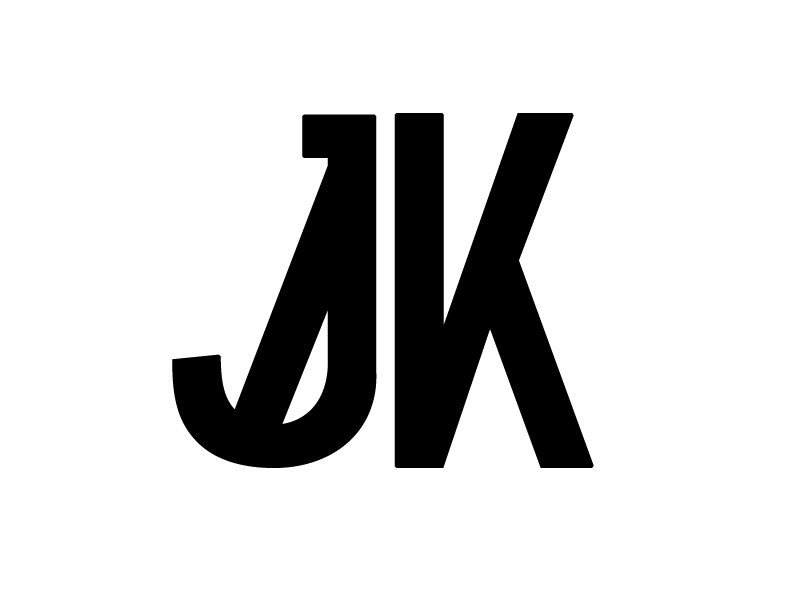
<style>
.page{position:relative;width:800px;height:600px;background:#ffffff}
.page>*{position:absolute;margin:0}
.t1{font:500px "HighTide";letter-spacing:0.02em;color:#000000;font-weight:bold}
</style>
<div class="page">
<p class="t1" style="left:172px;top:113px;width:422px;height:355px">JK</p>
</div>
